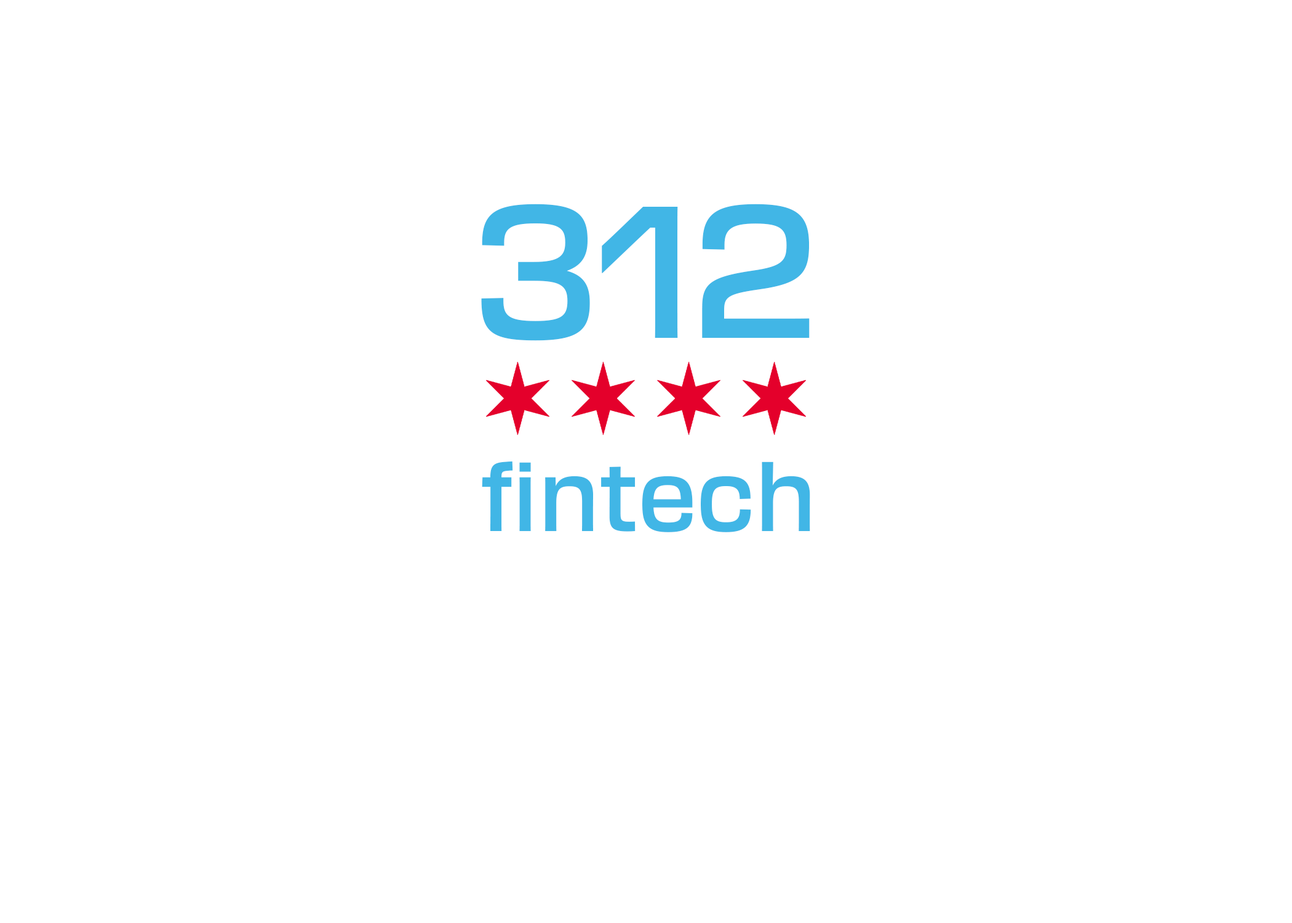
<style>
.page{position:relative;width:1292px;height:923px;background:#ffffff}
.page>*{position:absolute;margin:0}
.t1{font:184.6px "Transducer-Medium";letter-spacing:-0.005em;color:#41b6e6}
.t2{font:92.3px "Transducer-Medium";letter-spacing:-0.005em;color:#41b6e6}
</style>
<div class="page">
<p class="t1" style="left:481px;top:204px;width:329px;height:137px">312</p>
<p class="t2" style="left:482px;top:461px;width:328px;height:71px">fintech</p>
</div>
